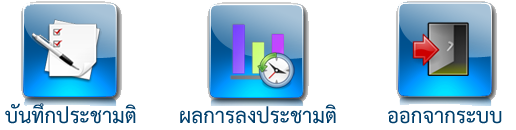
<style>
.page{position:relative;width:516px;height:130px;background:#ffffff}
.page>*{position:absolute;margin:0}
.t1{font:30px "THSarabunNew-Bold";color:#003f6c}
</style>
<div class="page">
<p class="t1" style="left:5px;top:103px;width:131px;height:21px">บันทึกประชามติ</p>
<p class="t1" style="left:180px;top:104px;width:156px;height:20px">ผลการลงประชามติ</p>
<p class="t1" style="left:388px;top:110px;width:114px;height:14px">ออกจากระบบ</p>
</div>
